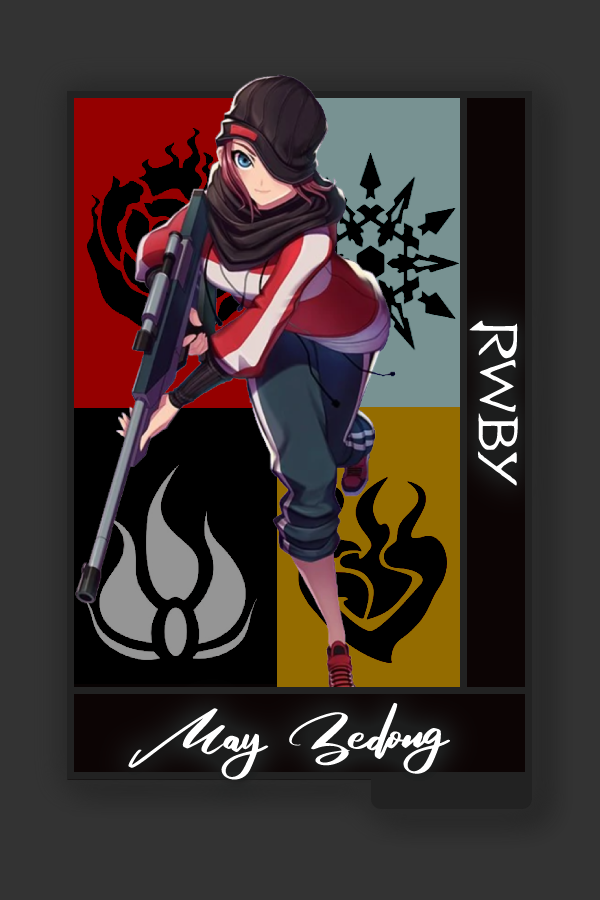
<style>
.page{position:relative;width:600px;height:900px;background:#333333}
.page>*{position:absolute;margin:0}
.t1{font:61.3px "RWBY_Style";color:#ffffff;scale:1.25 1}
.t2{font:75px "RosegaFREE";color:#ffffff}
</style>
<div class="page">
<p class="t1" style="left:469px;top:320px;width:49px;height:166px;rotate:90deg">RWBY</p>
<p class="t2" style="left:128px;top:702px;width:323px;height:83px">May Zedong</p>
</div>
